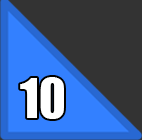
<style>
.page{position:relative;width:142px;height:140px;background:#333333}
.page>*{position:absolute;margin:0}
.t1{font:50px "Impact";color:#ffffff}
</style>
<div class="page">
<p class="t1" style="left:20px;top:77px;width:44px;height:42px">10</p>
</div>
